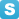
<style>
.page{position:relative;width:19px;height:19px}
.page>*{position:absolute;margin:0}
.t1{font:16px "Arial-Black";color:#ffffff;text-transform:uppercase}
</style>
<div class="page">
<p class="t1" style="left:4px;top:3px;width:11px;height:13px">S</p>
</div>
